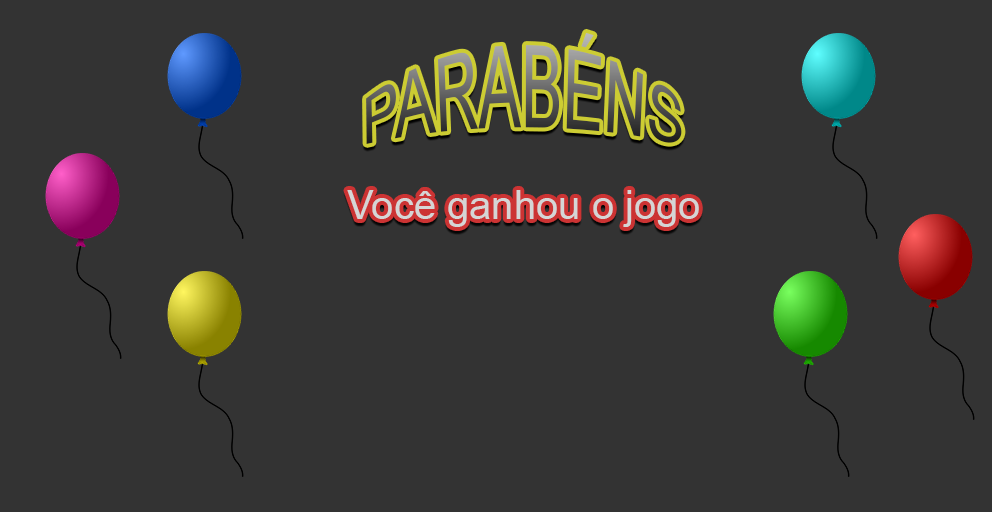
<style>
.page{position:relative;width:992px;height:512px;background:#333333}
.page>*{position:absolute;margin:0}
.t1{font:60px "ArialMT"}
.t2{font:40px "ArialMT";color:#d5d5d5}
</style>
<div class="page">
<p class="t1" style="left:366px;top:32px;width:316px;height:112px;text-align:center">PARABÉNS</p>
<p class="t2" style="left:347px;top:190px;width:352px;height:37px">Você ganhou o jogo</p>
</div>
